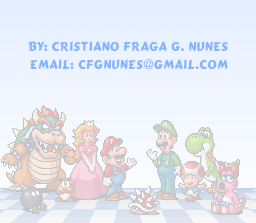
<style>
.page{position:relative;width:256px;height:223px}
.page>*{position:absolute;margin:0}
.t1{font:12px "Cartoon-Bold";color:#85b3ff}
</style>
<div class="page">
<p class="t1" style="left:28px;top:41px;width:200px;height:11px">By: Cristiano Fraga G. Nunes</p>
<p class="t1" style="left:30px;top:59px;width:198px;height:11px">Email: cfgnunes@gmail.com</p>
</div>
